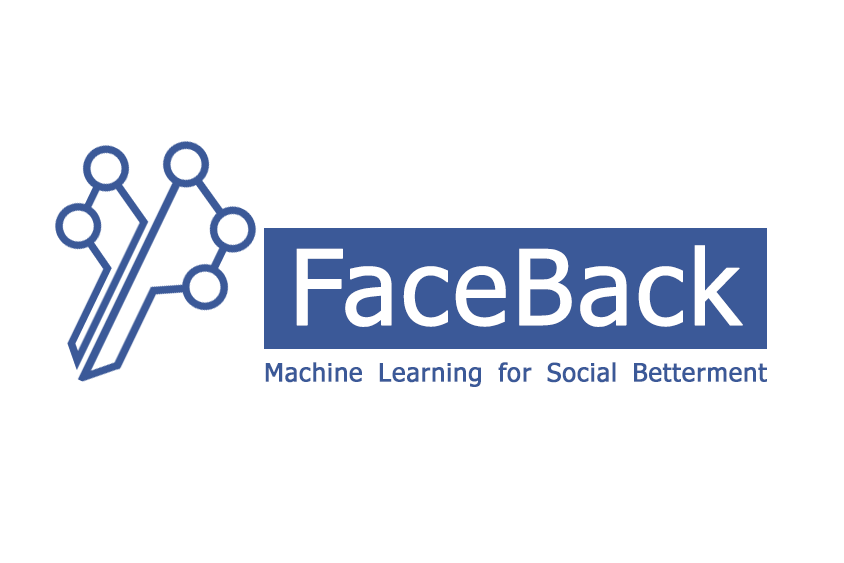
<style>
.page{position:relative;width:844px;height:563px;background:#ffffff}
.page>*{position:absolute;margin:0}
.t1{font:104.2px "Tahoma";letter-spacing:0.01em;color:#ffffff;font-weight:bold}
.t2{font:25px "Tahoma";letter-spacing:0.01em;color:#3b5998;font-weight:bold}
.t3{font:25px "Tahoma";letter-spacing:0.01em;color:#ffffff;font-weight:bold}
</style>
<div class="page">
<p class="t1" style="left:296px;top:245px;width:447px;height:82px">FaceBack</p>
<p class="t2" style="left:265px;top:362px;width:502px;height:25px">Machine<span class="t3">_</span>Learning<span class="t3">_</span>for<span class="t3">_</span>Social<span class="t3">_</span>Betterment</p>
</div>
